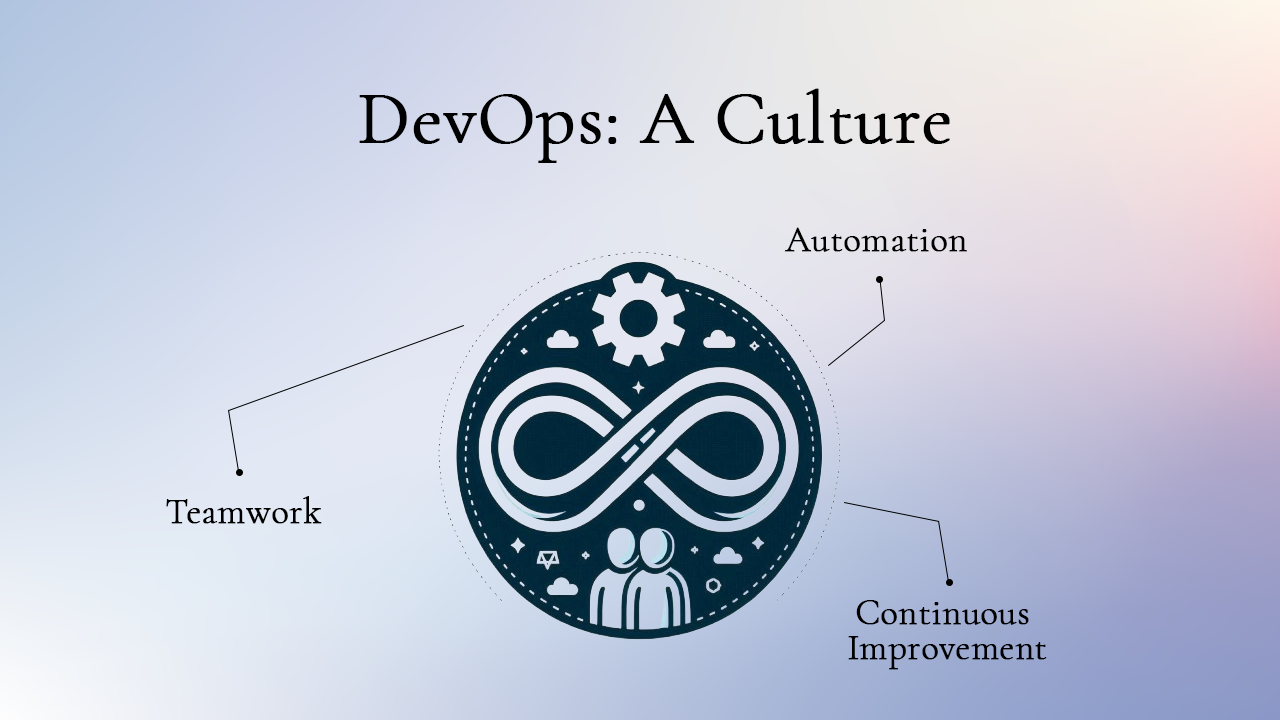
<style>
.page{position:relative;width:1280px;height:720px}
.page>*{position:absolute;margin:0}
.t1{font:74.7px "CormorantGaramond-Light";color:#000000;font-weight:bold}
.t2{font:36px "CormorantGaramond-Light";color:#000000;font-weight:bold}
.t3{font:36px/35.2px "CormorantGaramond-Light";color:#000000;font-weight:bold}
</style>
<div class="page">
<p class="t1" style="left:359px;top:88px;width:591px;height:75px">DevOps: A Culture</p>
<p class="t2" style="left:784px;top:227px;width:183px;height:25px">Automation</p>
<p class="t2" style="left:166px;top:496px;width:156px;height:28px">Teamwork</p>
<p class="t3" style="left:848px;top:600px;width:199px;height:70px;text-align:center">Continuous <br>Improvement</p>
</div>
